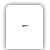
<style>
.page{position:relative;width:50px;height:50px;background:#ffffff}
.page>*{position:absolute;margin:0}
.t1{font:26px "OptimusPrinceps"}
</style>
<div class="page">
<p class="t1" style="left:22px;top:25px;width:7px;height:2px">-</p>
</div>
